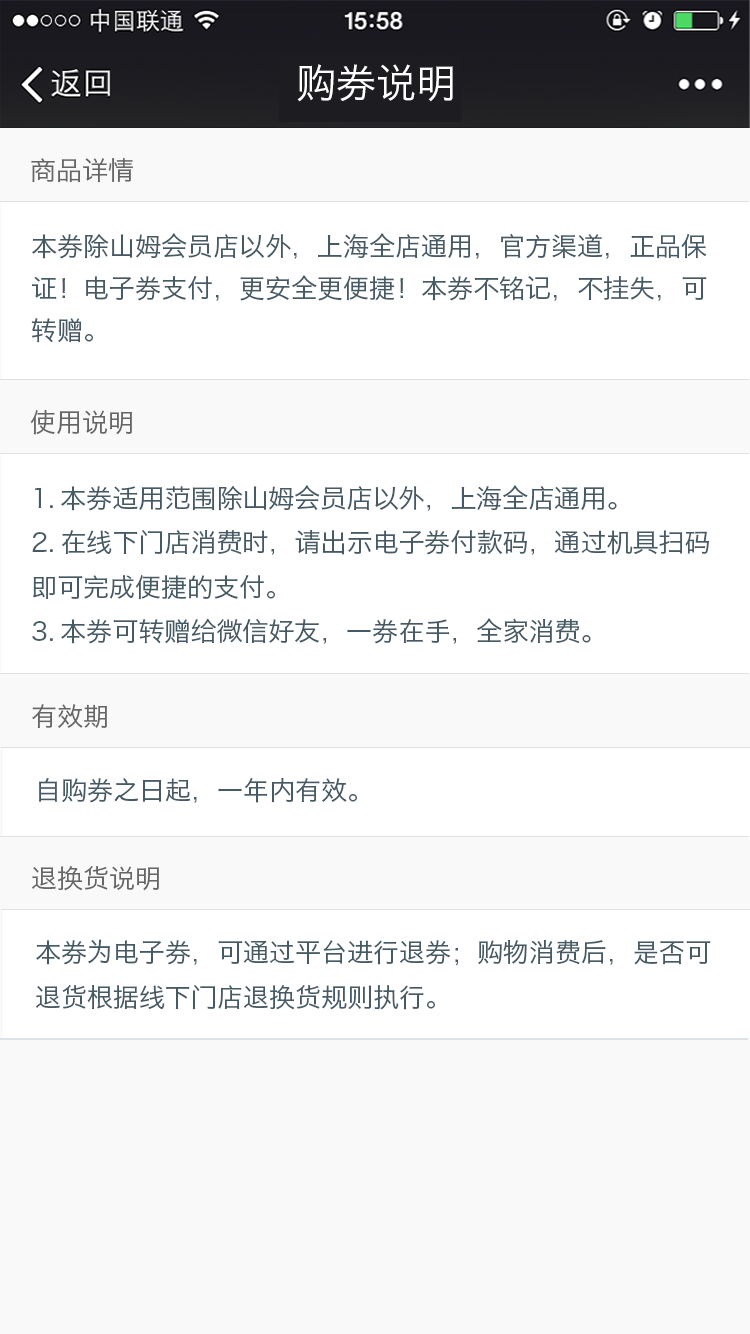
<style>
.page{position:relative;width:750px;height:1334px;background:#f9f9f9}
.page>*{position:absolute;margin:0}
.t1{font:40px "HiraginoSansGB-W3";color:#ffffff}
.t2{font:26px "HiraginoSansGB-W3";color:#666666}
.t3{font:26px/42px "HiraginoSansGB-W3";color:#455a64}
.t4{font:26px "HiraginoSansGB-W3";color:#455a64}
</style>
<div class="page">
<p class="t1" style="left:297px;top:64px;width:156px;height:38px">购券说明</p>
<p class="t2" style="left:31px;top:158px;width:102px;height:25px">商品详情</p>
<p class="t3" style="left:31px;top:233px;width:676px;height:110px">本券除山姆会员店以外，上海全店通用，官方渠道，正品保<br>证！电子券支付，更安全更便捷！本券不铭记，不挂失，可<br>转赠。</p>
<p class="t2" style="left:30px;top:410px;width:102px;height:25px">使用说明</p>
<p class="t4" style="left:35px;top:485px;width:582px;height:26px">1.本券适用范围除山姆会员店以外，上海全店通用。</p>
<p class="t4" style="left:32px;top:530px;width:677px;height:70px">2.在线下门店消费时，请出示电子券付款码，通过机具扫码<br>即可完成便捷的支付。</p>
<p class="t4" style="left:32px;top:618px;width:559px;height:26px">3.本券可转赠给微信好友，一券在手，全家消费。</p>
<p class="t2" style="left:32px;top:704px;width:75px;height:24px">有效期</p>
<p class="t4" style="left:39px;top:778px;width:318px;height:25px">自购券之日起，一年内有效。</p>
<p class="t2" style="left:32px;top:866px;width:127px;height:25px">退换货说明</p>
<p class="t4" style="left:36px;top:939px;width:675px;height:71px">本券为电子券，可通过平台进行退券；购物消费后，是否可<br>退货根据线下门店退换货规则执行。</p>
</div>
